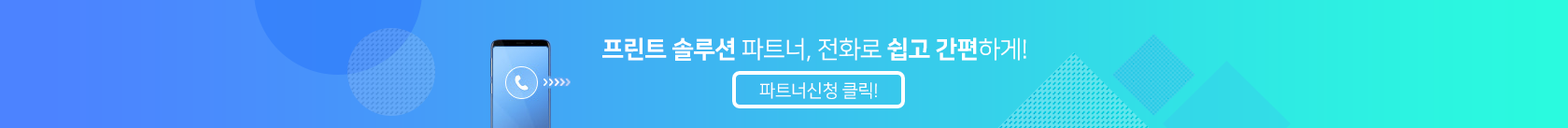
<style>
.page{position:relative;width:1568px;height:128px}
.page>*{position:absolute;margin:0}
.t1{font:24.3px "NanumSquareR";letter-spacing:-0.025em;color:#ffffff}
.t2{font:24.3px "NanumSquareEB";letter-spacing:-0.025em;color:#ffffff}
.t3{font:17.8px "NanumSquareR";letter-spacing:-0.025em;color:#ffffff}
</style>
<div class="page">
<p class="t1" style="left:602px;top:37px;width:424px;height:25px"><span class="t2">프린트 솔루션</span> 파트너, 전화로 <span class="t2">쉽고 간편</span>하게!</p>
<p class="t3" style="left:759px;top:82px;width:118px;height:17px">파트너신청 클릭!</p>
</div>
